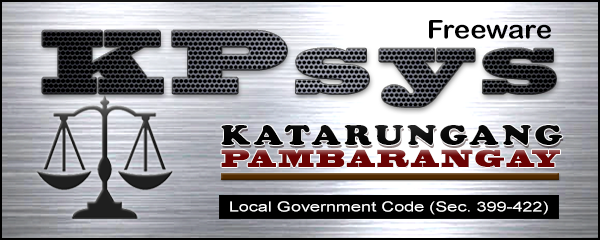
<style>
.page{position:relative;width:600px;height:240px}
.page>*{position:absolute;margin:0}
.t1{font:83.7px "BlackoakStd";letter-spacing:0.1em;scale:0.77 1}
.t2{font:26px "ArialRoundedMTBold";color:#000000;scale:1.05 1}
.t3{font:29.4px "CooperBlack";letter-spacing:0.1em;color:#000000;scale:1.2 1}
.t4{font:23.2px "BlackoakStd";letter-spacing:0.1em;color:#5c0202;scale:0.68 1}
.t5{font:14px "ArialMT";color:#ffffff;scale:1.29 1}
</style>
<div class="page">
<p class="t1" style="left:42px;top:30px;width:514px;height:77px">KPsys</p>
<p class="t2" style="left:429px;top:20px;width:122px;height:19px">Freeware</p>
<p class="t3" style="left:221px;top:125px;width:342px;height:21px">KATARUNGANG</p>
<p class="t4" style="left:221px;top:149px;width:339px;height:18px">PAMBARANGAY</p>
<p class="t5" style="left:230px;top:201px;width:318px;height:14px">Local Government Code (Sec. 399-422)</p>
</div>
